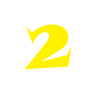
<style>
.page{position:relative;width:100px;height:100px;background:#ffffff}
.page>*{position:absolute;margin:0}
.t1{font:60px "SnapITC-Regular";color:#fff200}
</style>
<div class="page">
<p class="t1" style="left:24px;top:24px;width:48px;height:46px">2</p>
</div>
